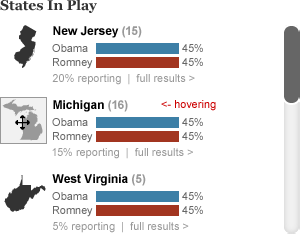
<style>
.page{position:relative;width:300px;height:250px;background:#ffffff}
.page>*{position:absolute;margin:0}
.t1{font:14px "Georgia-Bold";color:#333333}
.t2{font:50.4px "StateFace-Regular";color:#333333}
.t3{font:12px "Arial-BoldMT";color:#000000}
.t4{font:12px "Arial-BoldMT";color:#999999}
.t5{font:11px/14px "ArialMT";color:#666666}
.t6{font:11px "ArialMT";color:#999999}
.t7{font:50.4px "StateFace-Regular";color:#999999}
.t8{font:11px "ArialMT";color:#cc0000}
.t9{font:44.9px "StateFace-Regular";color:#333333}
</style>
<div class="page">
<p class="t1" style="left:0px;top:0px;width:97px;height:13px">States In Play</p>
<p class="t2" style="left:14px;top:25px;width:23px;height:43px">e</p>
<p class="t3" style="left:53px;top:26px;width:89px;height:12px">New Jersey<span class="t4"> (15)</span></p>
<p class="t5" style="left:52px;top:44px;width:41px;height:25px">Obama<br>Romney</p>
<p class="t5" style="left:182px;top:44px;width:21px;height:22px">45%<br>45%</p>
<p class="t6" style="left:52px;top:74px;width:143px;height:11px">20% reporting  |  full results &gt;</p>
<p class="t7" style="left:2px;top:99px;width:41px;height:42px">V</p>
<p class="t3" style="left:53px;top:100px;width:75px;height:12px">Michigan<span class="t4"> (16)</span></p>
<p class="t8" style="left:161px;top:100px;width:55px;height:11px">&lt;- hovering</p>
<p class="t5" style="left:52px;top:118px;width:41px;height:25px">Obama<br>Romney</p>
<p class="t5" style="left:182px;top:118px;width:21px;height:22px">45%<br>45%</p>
<p class="t6" style="left:52px;top:148px;width:141px;height:11px">15% reporting  |  full results &gt;</p>
<p class="t3" style="left:52px;top:174px;width:94px;height:12px">West Virginia<span class="t4"> (5)</span></p>
<p class="t9" style="left:4px;top:175px;width:42px;height:37px">w</p>
<p class="t5" style="left:52px;top:192px;width:41px;height:25px">Obama<br>Romney</p>
<p class="t5" style="left:182px;top:192px;width:21px;height:22px">45%<br>45%</p>
<p class="t6" style="left:53px;top:222px;width:136px;height:11px">5% reporting  |  full results &gt;</p>
</div>
